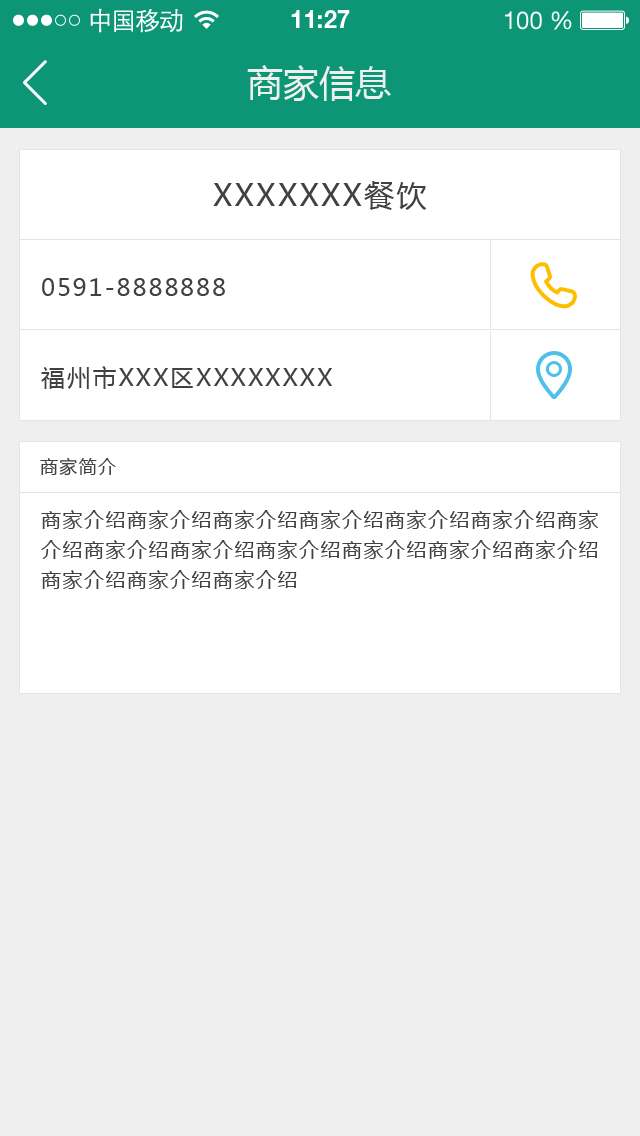
<style>
.page{position:relative;width:640px;height:1136px;background:#efefef}
.page>*{position:absolute;margin:0}
.t1{font:25px "STXihei";letter-spacing:-0.045em;color:#fefefe}
.t2{font:24.6px "HelveticaNeueLTPro-Bd";color:#ffffff}
.t3{font:24.6px "HelveticaNeueLTStd-Roman";color:#ffffff}
.t4{font:36px "MicrosoftYaHei";color:#efefef}
.t5{font:30px "MicrosoftYaHei";letter-spacing:0.075em;color:#414141}
.t6{font:24px "MicrosoftYaHei";letter-spacing:0.075em;color:#414141}
.t7{font:18px "MicrosoftYaHei";letter-spacing:0.075em;color:#414141}
.t8{font:20px/30px "MicrosoftYaHei";letter-spacing:0.075em;color:#414141}
</style>
<div class="page">
<p class="t1" style="left:90px;top:8px;width:93px;height:25px">中国移动</p>
<p class="t2" style="left:291px;top:10px;width:59px;height:18px">11:27</p>
<p class="t3" style="left:505px;top:11px;width:67px;height:19px">100 %</p>
<p class="t4" style="left:247px;top:65px;width:144px;height:36px">商家信息</p>
<p class="t5" style="left:213px;top:181px;width:214px;height:29px">XXXXXXX餐饮</p>
<p class="t6" style="left:42px;top:278px;width:183px;height:18px">0591-8888888</p>
<p class="t6" style="left:41px;top:366px;width:291px;height:23px">福州市XXX区XXXXXXXX</p>
<p class="t7" style="left:40px;top:457px;width:76px;height:19px">商家简介</p>
<p class="t8" style="left:41px;top:510px;width:558px;height:79px">商家介绍商家介绍商家介绍商家介绍商家介绍商家介绍商家介绍商家介绍商家介绍商家介绍商家介绍商家介绍商家介绍商家介绍商家介绍商家介绍</p>
</div>
